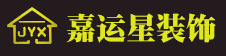
<style>
.page{position:relative;width:226px;height:56px;background:#241b1e}
.page>*{position:absolute;margin:0}
.t1{font:30px "SungtiEG-Ultra-?";color:#e1e71e}
</style>
<div class="page">
<p class="t1" style="left:66px;top:13px;width:150px;height:30px">嘉运星装饰</p>
</div>
